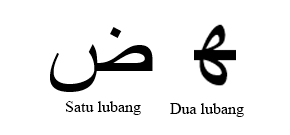
<style>
.page{position:relative;width:290px;height:135px;background:#ffffff}
.page>*{position:absolute;margin:0}
.t1{font:16px "TimesNewRomanPSMT";color:#000000}
</style>
<div class="page">
<p class="t1" style="left:65px;top:101px;width:76px;height:14px">Satu lubang</p>
<p class="t1" style="left:170px;top:103px;width:74px;height:14px">Dua lubang</p>
</div>
